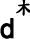
<style>
.page{position:relative;width:30px;height:39px;background:#ffffff}
.page>*{position:absolute;margin:0}
.t1{font:27px "ArialMT";color:#000000;font-weight:bold}
</style>
<div class="page">
<p class="t1" style="left:0px;top:18px;width:14px;height:21px">d</p>
</div>
